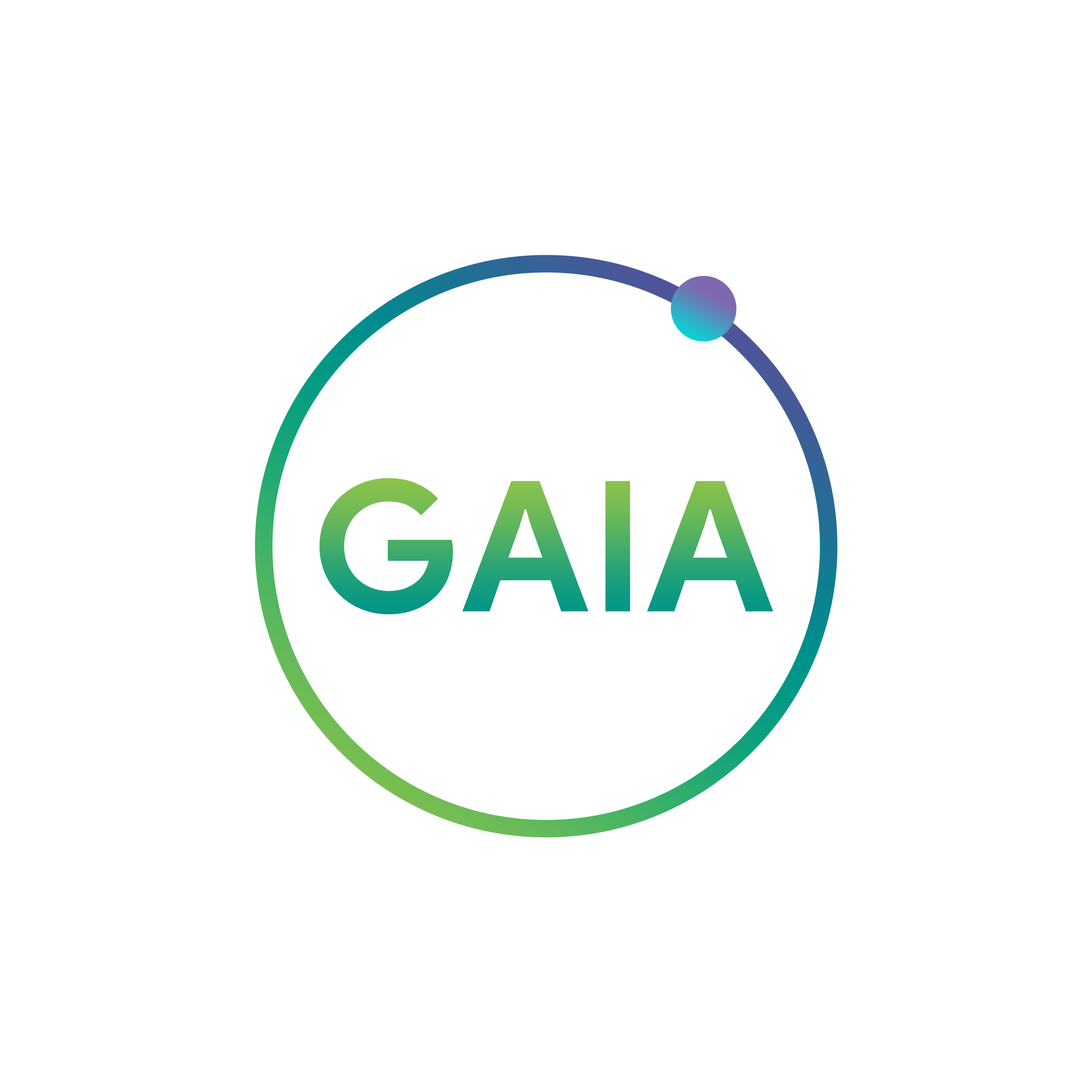
<style>
.page{position:relative;width:1092px;height:1092px;background:#ffffff}
.page>*{position:absolute;margin:0}
.t1{font:182px "ProductSans-Bold";letter-spacing:0.01em}
</style>
<div class="page">
<p class="t1" style="left:319px;top:478px;width:454px;height:136px">GAIA</p>
</div>
